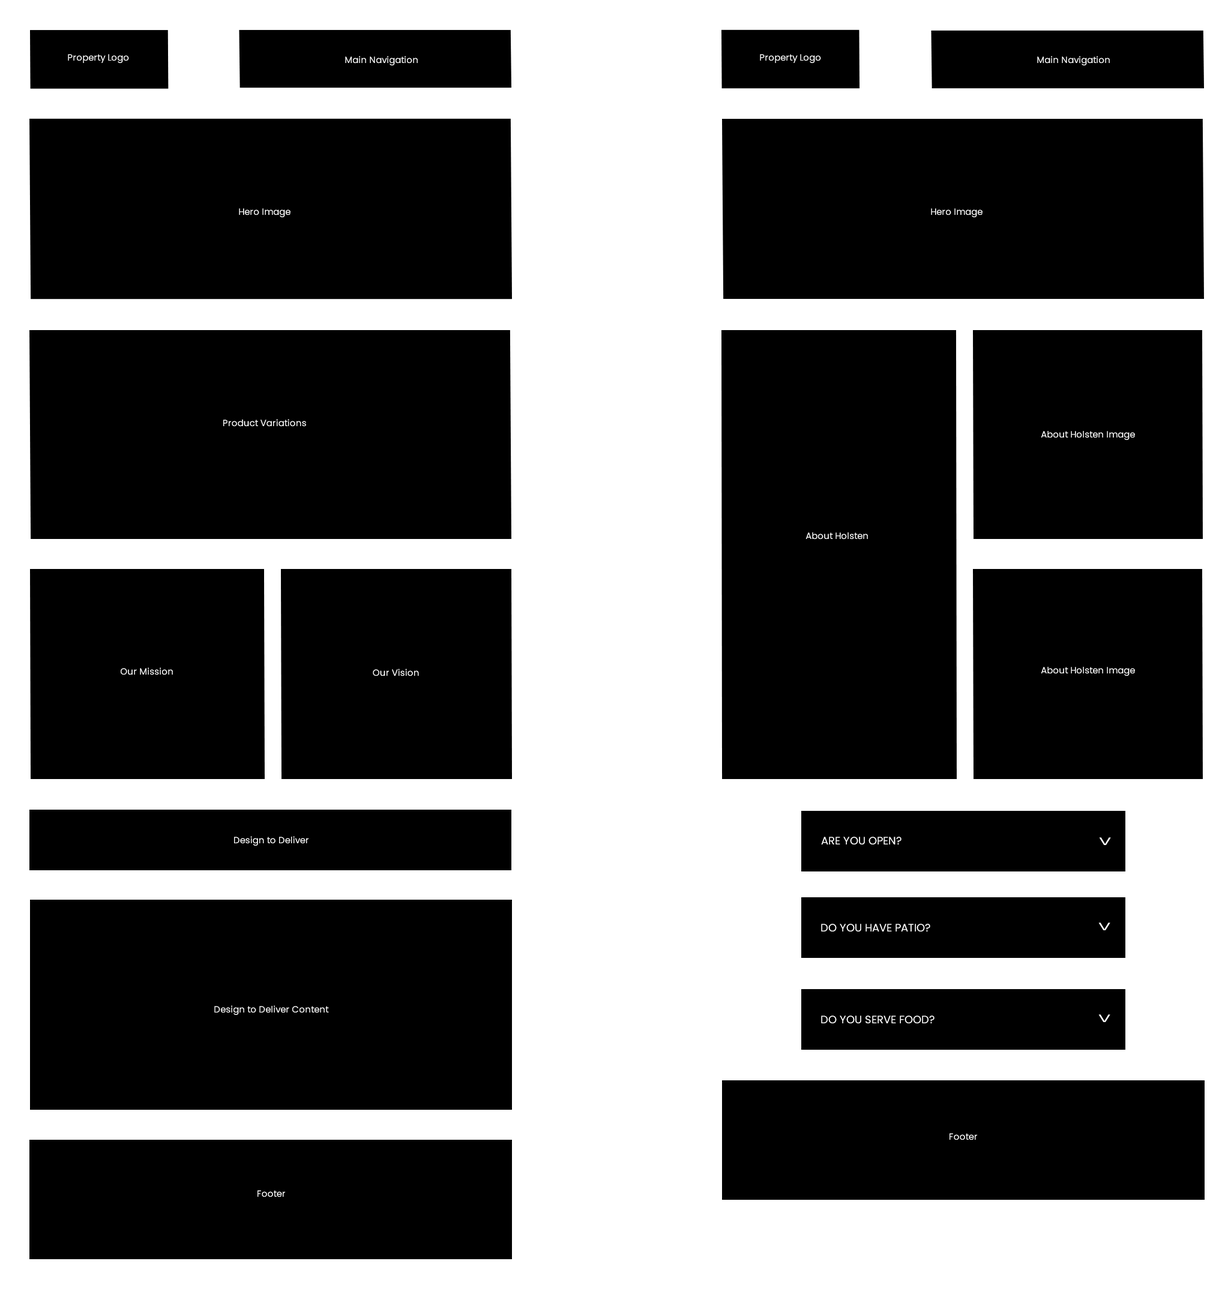
<style>
.page{position:relative;width:1231px;height:1291px;background:#000000}
.page>*{position:absolute;margin:0}
.t1{font:9px "Poppins-Regular";color:#ffffff}
.t2{font:10.8px "Poppins-Regular";color:#ffffff}
.t3{font:10.8px "Poppins-Regular";color:#ffffff;scale:1.67 1}
</style>
<div class="page">
<p class="t1" style="left:68px;top:54px;width:61px;height:9px">Property Logo</p>
<p class="t1" style="left:760px;top:54px;width:61px;height:9px">Property Logo</p>
<p class="t1" style="left:345px;top:56px;width:73px;height:9px">Main Navigation</p>
<p class="t1" style="left:1037px;top:56px;width:72px;height:9px">Main Navigation</p>
<p class="t1" style="left:239px;top:208px;width:51px;height:9px">Hero Image</p>
<p class="t1" style="left:931px;top:208px;width:51px;height:9px">Hero Image</p>
<p class="t1" style="left:223px;top:419px;width:83px;height:8px">Product Variations</p>
<p class="t1" style="left:1040px;top:431px;width:95px;height:9px">About Holsten Image</p>
<p class="t1" style="left:805px;top:532px;width:63px;height:7px">About Holsten</p>
<p class="t1" style="left:121px;top:667px;width:52px;height:8px">Our Mission</p>
<p class="t1" style="left:373px;top:668px;width:46px;height:8px">Our Vision</p>
<p class="t1" style="left:1040px;top:667px;width:95px;height:9px">About Holsten Image</p>
<p class="t1" style="left:234px;top:836px;width:74px;height:9px">Design to Deliver</p>
<p class="t2" style="left:821px;top:836px;width:80px;height:9px">ARE YOU OPEN?</p>
<p class="t3" style="left:1099px;top:837px;width:12px;height:8px">V</p>
<p class="t2" style="left:821px;top:923px;width:109px;height:9px">DO YOU HAVE PATIO?</p>
<p class="t3" style="left:1098px;top:922px;width:12px;height:8px">V</p>
<p class="t1" style="left:214px;top:1005px;width:115px;height:10px">Design to Deliver Content</p>
<p class="t3" style="left:1098px;top:1014px;width:12px;height:8px">V</p>
<p class="t2" style="left:821px;top:1015px;width:113px;height:9px">DO YOU SERVE FOOD?</p>
<p class="t1" style="left:949px;top:1133px;width:28px;height:7px">Footer</p>
<p class="t1" style="left:257px;top:1190px;width:28px;height:7px">Footer</p>
</div>
